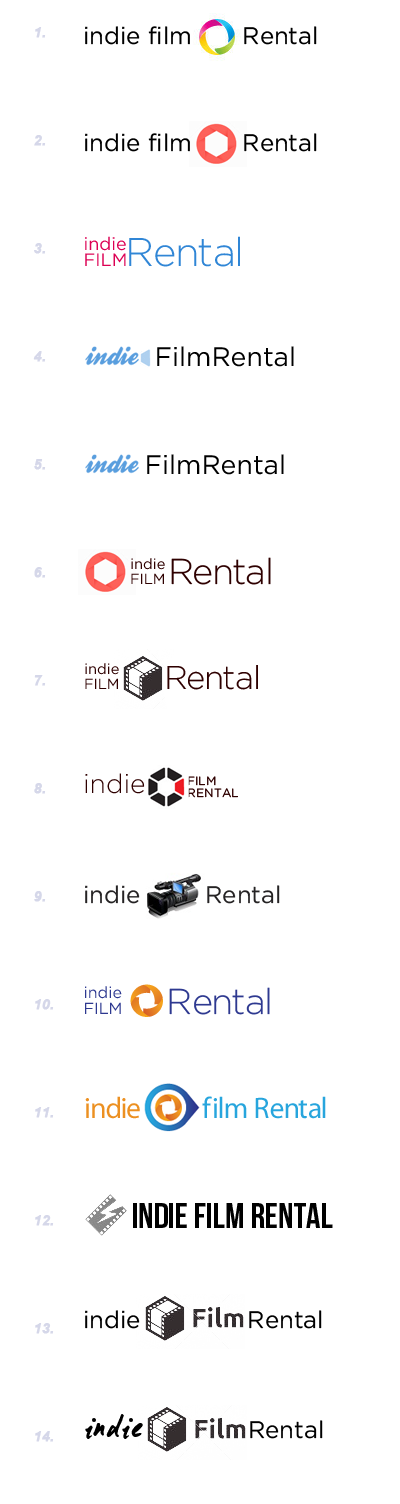
<style>
.page{position:relative;width:400px;height:1504px;background:#ffffff}
.page>*{position:absolute;margin:0}
.t1{font:24px "Gotham-Book";color:#000000}
.t2{font:18px/17px "Gotham-Book";color:#dc0053}
.t3{font:40px "Gotham-Light";color:#3086d6}
.t4{font:26.6px "Gotham-Book";color:#000000}
.t5{font:14.7px/15.6px "Gotham-Book";color:#2e0000}
.t6{font:36px "Gotham-Light";color:#2e0000}
.t7{font:33px "Gotham-Light";color:#2e0000}
.t8{font:26.6px "Gotham-Light";color:#2e0000}
.t9{font:12px/11.7px "Gotham-Book";color:#2e0000}
.t10{font:24px "Gotham-Book";color:#252324}
.t11{font:16px/17px "Gotham-Book";color:#2e3990}
.t12{font:36px "Gotham-Light";color:#2e3990}
.t13{font:29.8px "MyriadPro-Regular";color:#ec9021}
.t14{font:29.8px "MyriadPro-Regular";color:#27a5dd}
.t15{font:36px "BebasNeue";color:#000000}
</style>
<div class="page">
<p class="t1" style="left:85px;top:26px;width:232px;height:19px">indie film       Rental</p>
<p class="t1" style="left:85px;top:133px;width:232px;height:19px">indie film       Rental</p>
<p class="t2" style="left:85px;top:236px;width:41px;height:30px">indie<br>FILM</p>
<p class="t3" style="left:129px;top:236px;width:111px;height:31px">Rental</p>
<p class="t4" style="left:157px;top:346px;width:137px;height:21px">FilmRental</p>
<p class="t4" style="left:147px;top:454px;width:137px;height:21px">FilmRental</p>
<p class="t5" style="left:131px;top:558px;width:34px;height:26px">indie<br>FILM</p>
<p class="t6" style="left:171px;top:557px;width:100px;height:28px">Rental</p>
<p class="t5" style="left:85px;top:663px;width:34px;height:26px">indie<br>FILM</p>
<p class="t7" style="left:167px;top:665px;width:91px;height:25px">Rental</p>
<p class="t8" style="left:85px;top:773px;width:60px;height:21px">indie</p>
<p class="t9" style="left:188px;top:776px;width:50px;height:22px">FILM<br>R ENTAL</p>
<p class="t10" style="left:85px;top:885px;width:195px;height:19px">indie         Rental</p>
<p class="t11" style="left:85px;top:986px;width:37px;height:28px">indie<br>FILM</p>
<p class="t12" style="left:169px;top:987px;width:101px;height:28px">Rental</p>
<p class="t13" style="left:85px;top:1096px;width:55px;height:23px">indie</p>
<p class="t14" style="left:202px;top:1096px;width:124px;height:23px">f ilm Rental</p>
<p class="t15" style="left:133px;top:1203px;width:200px;height:25px">indie film rental</p>
<p class="t1" style="left:85px;top:1310px;width:237px;height:19px">indie               Rental</p>
<p class="t1" style="left:250px;top:1420px;width:73px;height:19px">Rental</p>
</div>
